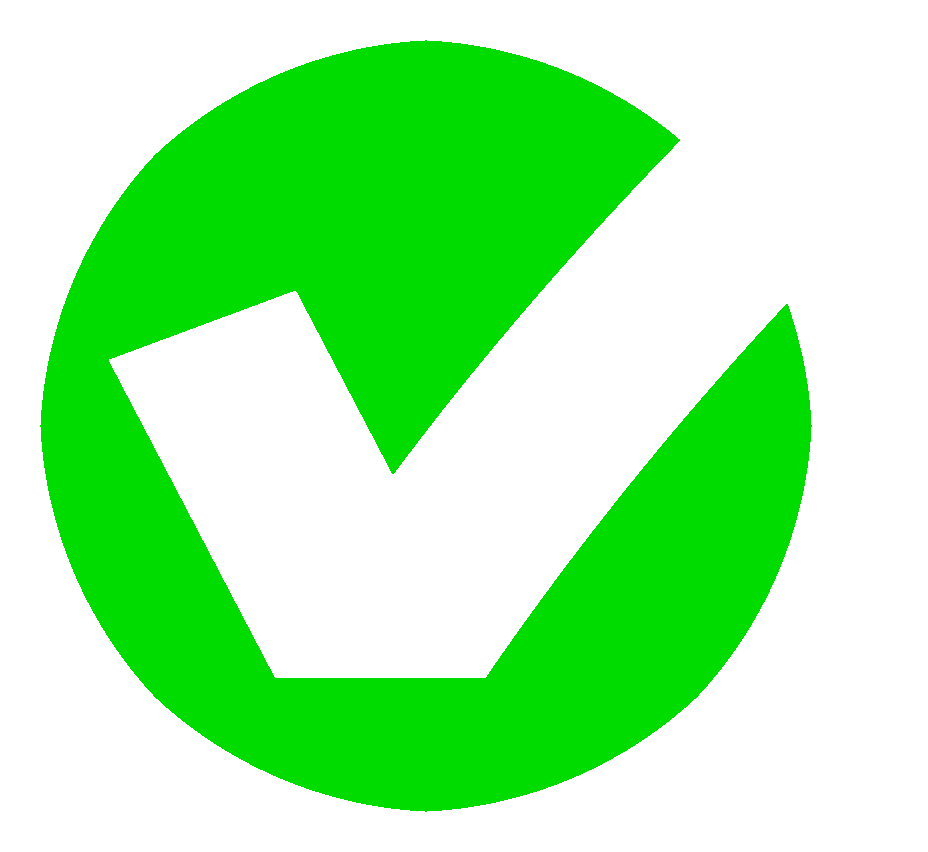
<style>
.page{position:relative;width:928px;height:852px;background:#ffffff}
.page>*{position:absolute;margin:0}
.t1{font:895.6px "Keifont";color:#ffffff;scale:1.2 1}
</style>
<div class="page">
<p class="t1" style="left:109px;top:47px;width:819px;height:631px">✔</p>
</div>
